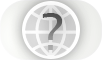
<style>
.page{position:relative;width:102px;height:60px}
.page>*{position:absolute;margin:0}
.t1{font:50.2px "LucidaSansUnicode"}
</style>
<div class="page">
<p class="t1" style="left:42px;top:13px;width:21px;height:37px">?</p>
</div>
